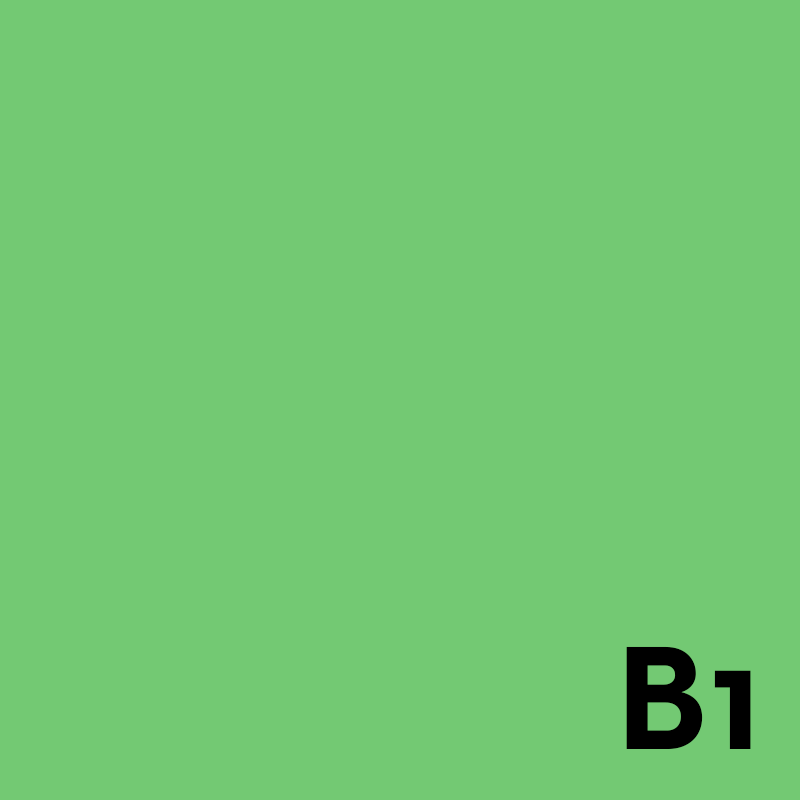
<style>
.page{position:relative;width:800px;height:800px;background:#73c973}
.page>*{position:absolute;margin:0}
.t1{font:150px "NeutraText-Bold";letter-spacing:0.025em;color:#000000}
</style>
<div class="page">
<p class="t1" style="left:626px;top:646px;width:125px;height:103px">B1</p>
</div>
